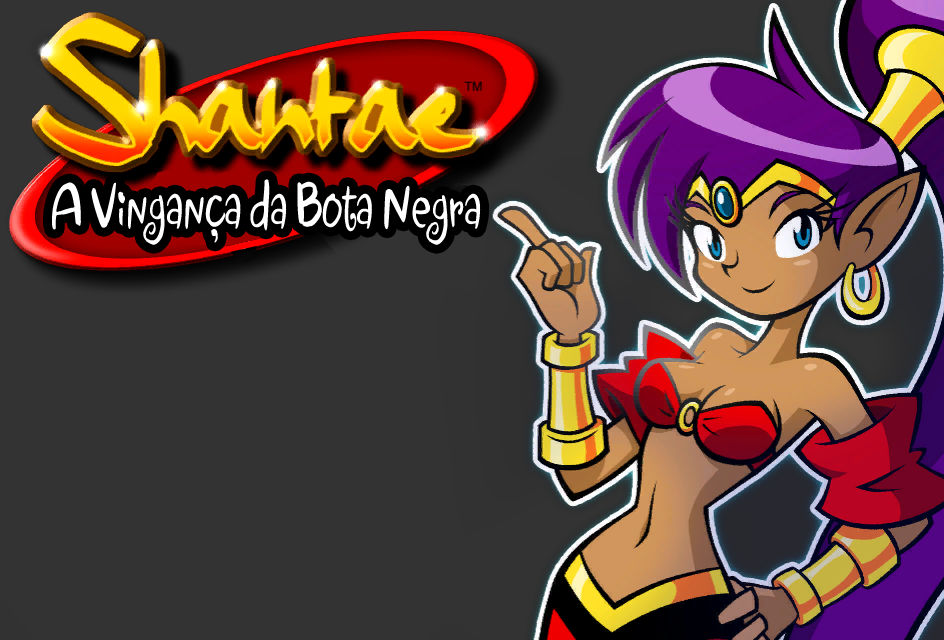
<style>
.page{position:relative;width:944px;height:640px;background:#333333}
.page>*{position:absolute;margin:0}
.t1{font:74.4px "Jewels";color:#ffffff;scale:0.62 1}
</style>
<div class="page">
<p class="t1" style="left:52px;top:179px;width:429px;height:66px">A Vingança da Bota Negra</p>
</div>
